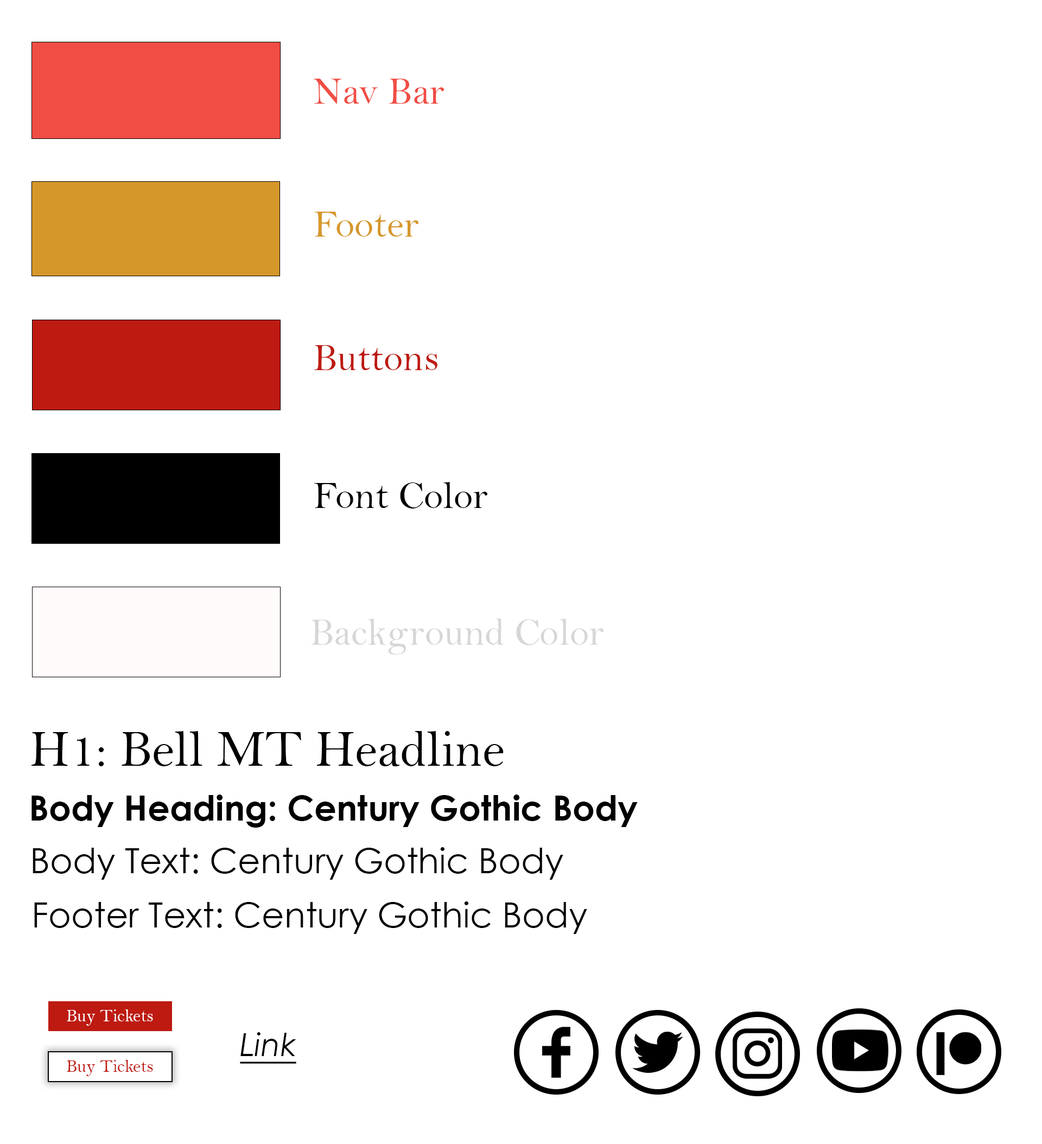
<style>
.page{position:relative;width:1042px;height:1144px;background:#ffffff}
.page>*{position:absolute;margin:0}
.t1{font:39.1px "BellMT";color:#f04d44}
.t2{font:39.1px "BellMT";color:#d6972a}
.t3{font:39.1px "BellMT";color:#bd1a11}
.t4{font:39.1px "BellMT";color:#000000}
.t5{font:39.1px "BellMT";color:#d7d6d6}
.t6{font:52.1px "BellMT";color:#000000}
.t7{font:34.7px "CenturyGothic-Bold";color:#000000}
.t8{font:34.7px "CenturyGothic";color:#000000}
.t9{font:17.9px "BellMT";color:#ffffff}
.t10{font:31.7px "CenturyGothic-Italic";color:#000000;text-decoration:underline}
.t11{font:17.9px "BellMT";color:#bd1a11}
</style>
<div class="page">
<p class="t1" style="left:314px;top:79px;width:130px;height:25px">Nav Bar</p>
<p class="t2" style="left:314px;top:212px;width:104px;height:25px">Footer</p>
<p class="t3" style="left:314px;top:345px;width:123px;height:26px">Buttons</p>
<p class="t4" style="left:314px;top:482px;width:173px;height:27px">Font Color</p>
<p class="t5" style="left:311px;top:619px;width:293px;height:36px">Background Color</p>
<p class="t6" style="left:31px;top:731px;width:473px;height:35px">H1: Bell MT Headline</p>
<p class="t7" style="left:31px;top:795px;width:607px;height:33px">Body Heading: Century Gothic Body</p>
<p class="t8" style="left:33px;top:847px;width:530px;height:33px">Body Text: Century Gothic Body</p>
<p class="t8" style="left:34px;top:902px;width:553px;height:32px">Footer Text: Century Gothic Body</p>
<p class="t9" style="left:67px;top:1010px;width:86px;height:16px">Buy Tickets</p>
<p class="t10" style="left:240px;top:1032px;width:56px;height:32px">Link</p>
<p class="t11" style="left:67px;top:1060px;width:86px;height:16px">Buy Tickets</p>
</div>
